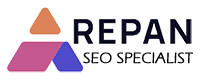
<style>
.page{position:relative;width:200px;height:81px;background:#ffffff}
.page>*{position:absolute;margin:0}
.t1{font:15px "ErasITC-Light";color:#000000;text-transform:uppercase;font-weight:bold;scale:1.07 1}
</style>
<div class="page">
<p class="t1" style="left:83px;top:52px;width:110px;height:12px">SEO specialist</p>
</div>
